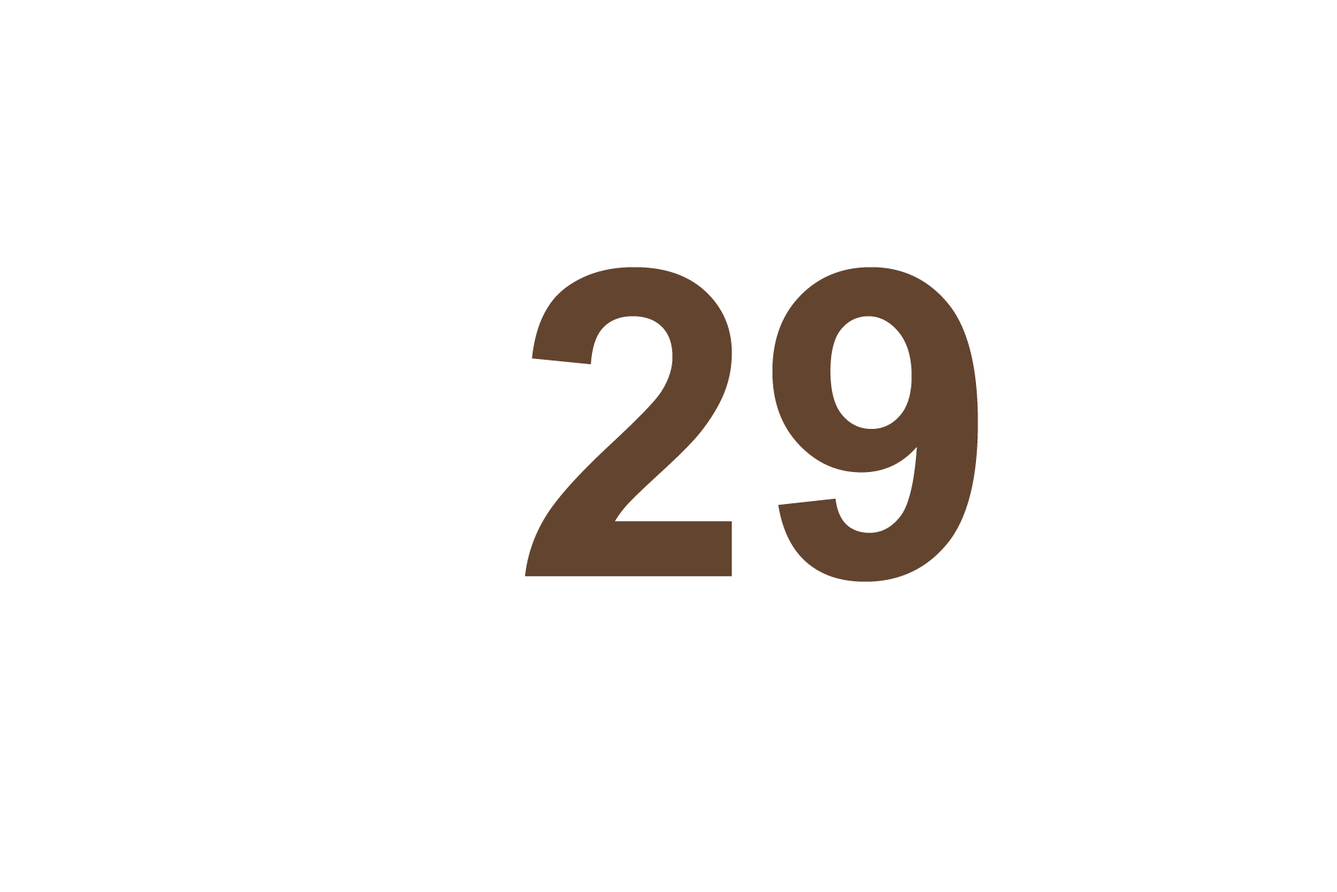
<style>
.page{position:relative;width:1337px;height:892px;background:#ffffff}
.page>*{position:absolute;margin:0}
.t1{font:429.6px "Arial-BoldMT";color:#63442f}
</style>
<div class="page">
<p class="t1" style="left:525px;top:267px;width:454px;height:315px">29</p>
</div>
